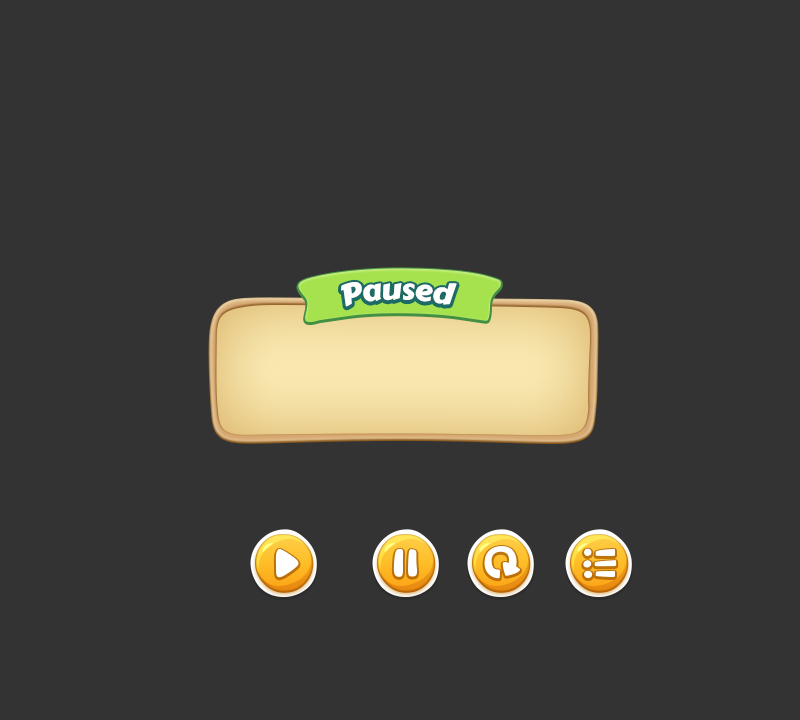
<style>
.page{position:relative;width:800px;height:720px;background:#333333}
.page>*{position:absolute;margin:0}
.t1{font:30px "CarterOne";letter-spacing:-0.02em;color:#ffffff}
</style>
<div class="page">
<p class="t1" style="left:341px;top:282px;width:116px;height:25px">Paused</p>
</div>
